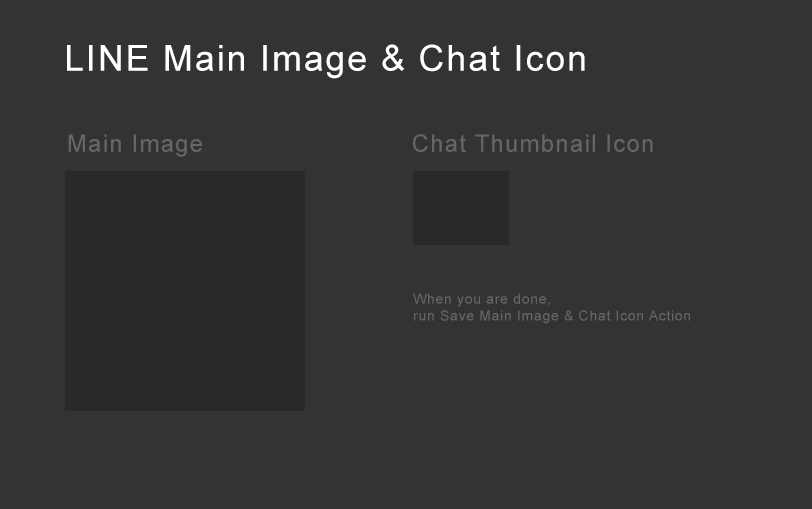
<style>
.page{position:relative;width:812px;height:509px;background:#333333}
.page>*{position:absolute;margin:0}
.t1{font:36px "ArialMT";letter-spacing:0.05em;color:#ffffff}
.t2{font:24px "ArialMT";letter-spacing:0.05em;color:#666666}
.t3{font:14px "ArialMT";letter-spacing:0.05em;color:#666666}
</style>
<div class="page">
<p class="t1" style="left:67px;top:44px;width:518px;height:35px">LINE Main Image &amp; Chat Icon</p>
<p class="t2" style="left:68px;top:134px;width:134px;height:23px">Main Image</p>
<p class="t2" style="left:413px;top:134px;width:240px;height:18px">Chat Thumbnail Icon</p>
<p class="t3" style="left:413px;top:293px;width:277px;height:31px">When you are done, <br>run Save Main Image &amp; Chat Icon Action</p>
</div>
